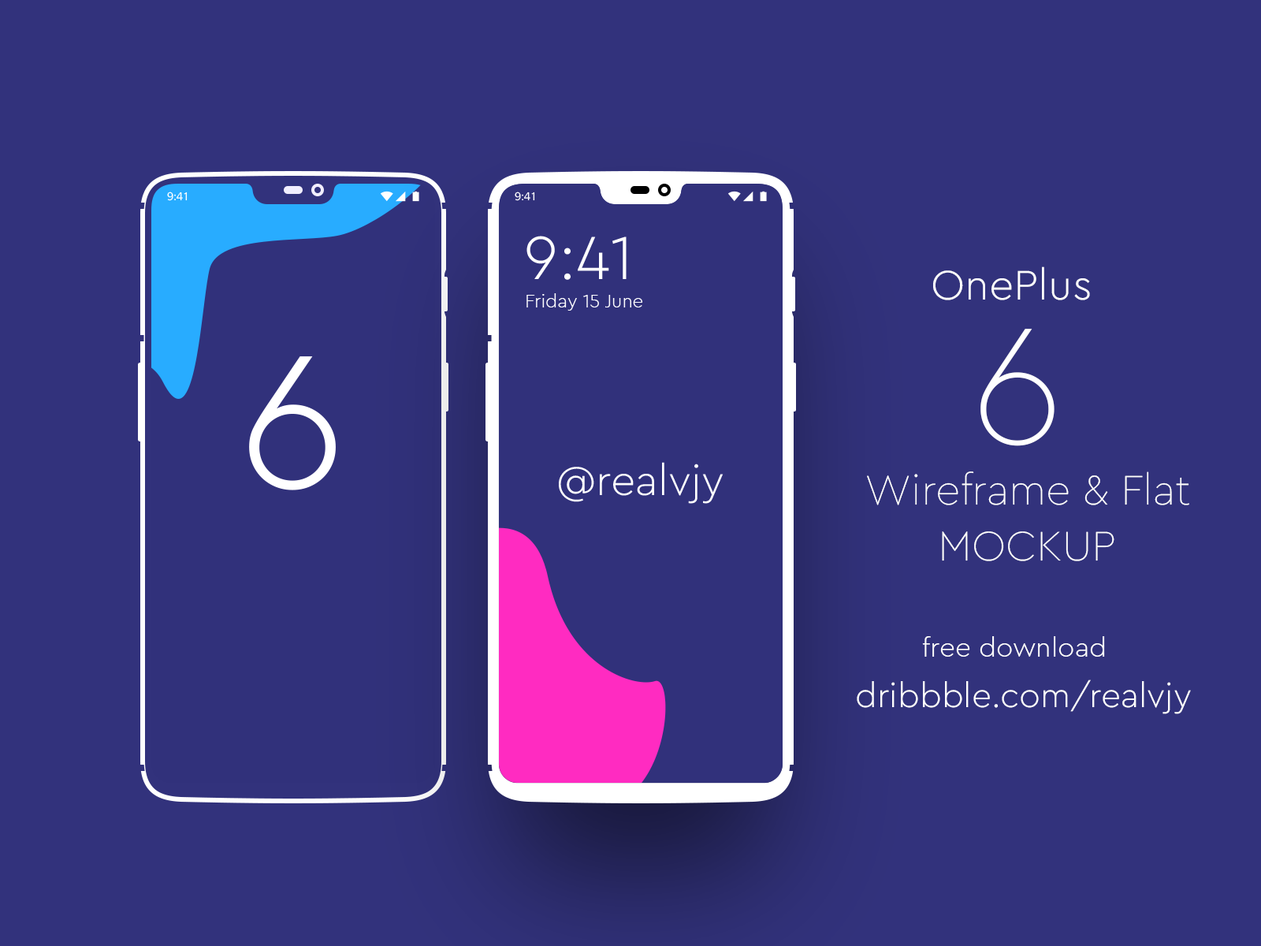
<style>
.page{position:relative;width:1261px;height:946px;background:#32327c}
.page>*{position:absolute;margin:0}
.t1{font:43.3px "CeraPRO-Light";color:#ffffff}
.t2{font:174.1px "CeraPRO-Thin";color:#ffffff}
.t3{font:43.3px "CeraPRO-Thin";color:#ffffff}
.t4{font:27.6px "CeraPRO-Light";color:#ffffff}
.t5{font:34.7px "CeraPRO-Light";color:#ffffff}
</style>
<div class="page">
<p class="t1" style="left:933px;top:266px;width:157px;height:34px">OnePlus</p>
<p class="t2" style="left:980px;top:329px;width:74px;height:117px">6</p>
<p class="t3" style="left:867px;top:471px;width:322px;height:34px">Wireframe &amp; Flat</p>
<p class="t3" style="left:942px;top:531px;width:172px;height:30px">MOCKUP</p>
<p class="t4" style="left:922px;top:636px;width:183px;height:20px">free download</p>
<p class="t5" style="left:857px;top:679px;width:334px;height:35px">dribbble.com/realvjy</p>
</div>
